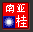
<style>
.page{position:relative;width:33px;height:32px;background:#f20000}
.page>*{position:absolute;margin:0}
.t1{font:10.4px "SimSun";color:#ffffff}
.t2{font:11.7px "SimSun";color:#ffffff}
</style>
<div class="page">
<p class="t1" style="left:6px;top:4px;width:19px;height:9px">南亚</p>
<p class="t2" style="left:16px;top:15px;width:11px;height:12px">桂</p>
</div>
